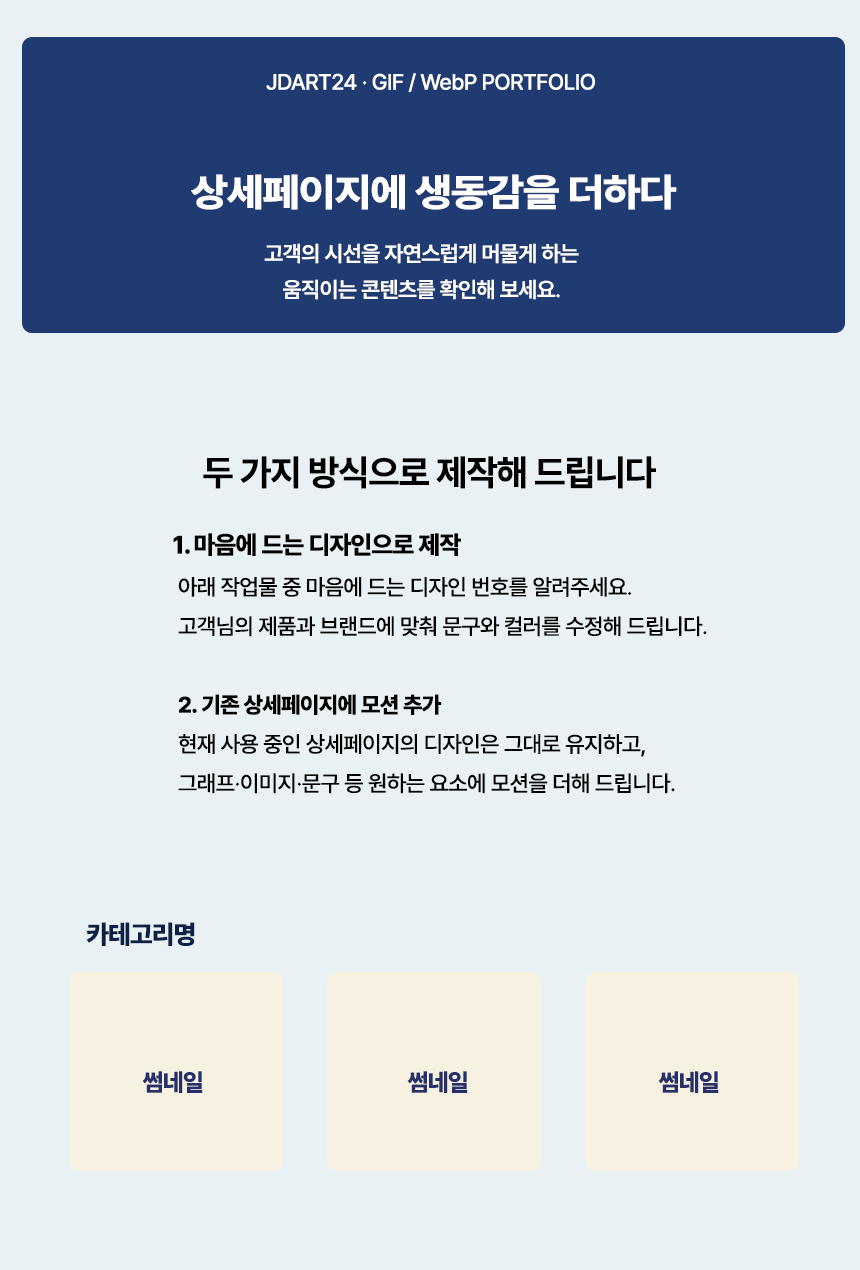
<style>
.page{position:relative;width:860px;height:1270px;background:#eaf1f4}
.page>*{position:absolute;margin:0}
.t1{font:22px "Pretendard-Medium";letter-spacing:-0.025em;color:#ffffff}
.t2{font:38.8px "Pretendard-ExtraBold";letter-spacing:-0.025em;color:#ffffff;scale:1.1 1}
.t3{font:22px/36px "Pretendard-SemiBold";letter-spacing:-0.025em;color:#ffffff}
.t4{font:36px "Pretendard-Bold";letter-spacing:-0.025em;color:#000000}
.t5{font:22.4px "Pretendard-Medium";letter-spacing:-0.025em;color:#000000}
.t6{font:25px "Pretendard-ExtraBold";letter-spacing:-0.025em;color:#000000}
.t7{font:22.4px "Pretendard-ExtraBold";letter-spacing:-0.025em;color:#000000}
.t8{font:26px "Pretendard-ExtraBold";letter-spacing:-0.025em;color:#0d2045}
.t9{font:24px "Pretendard-ExtraBold";letter-spacing:-0.025em;color:#26316b}
</style>
<div class="page">
<p class="t1" style="left:266px;top:73px;width:329px;height:19px">JDART24 · GIF / WebP PORTFOLIO</p>
<p class="t2" style="left:191px;top:174px;width:486px;height:36px">상세페이지에 생동감을 더하다</p>
<p class="t3" style="left:264px;top:243px;width:315px;height:57px;text-align:center">고객의 시선을 자연스럽게 머물게 하는<br>움직이는 콘텐츠를 확인해 보세요.</p>
<p class="t4" style="left:203px;top:456px;width:453px;height:33px">두 가지 방식으로 제작해 드립니다</p>
<p class="t5" style="left:173px;top:533px;width:534px;height:261px"><span class="t6">1.마음에 드는 디자인으로 제작<br></span>아래 작업물 중 마음에 드는 디자인 번호를 알려주세요.<br>고객님의 제품과 브랜드에 맞춰 문구와 컬러를 수정해 드립니다.<br><span class="t7"><br>2.기존 상세페이지에 모션 추가<br></span>현재 사용 중인 상세페이지의 디자인은 그대로 유지하고,<br>그래프·이미지·문구 등 원하는 요소에 모션을 더해 드립니다.</p>
<p class="t8" style="left:86px;top:922px;width:109px;height:24px">카테고리명</p>
<p class="t9" style="left:142px;top:1071px;width:61px;height:22px">썸네일</p>
<p class="t9" style="left:407px;top:1071px;width:61px;height:22px">썸네일</p>
<p class="t9" style="left:658px;top:1071px;width:61px;height:22px">썸네일</p>
</div>
